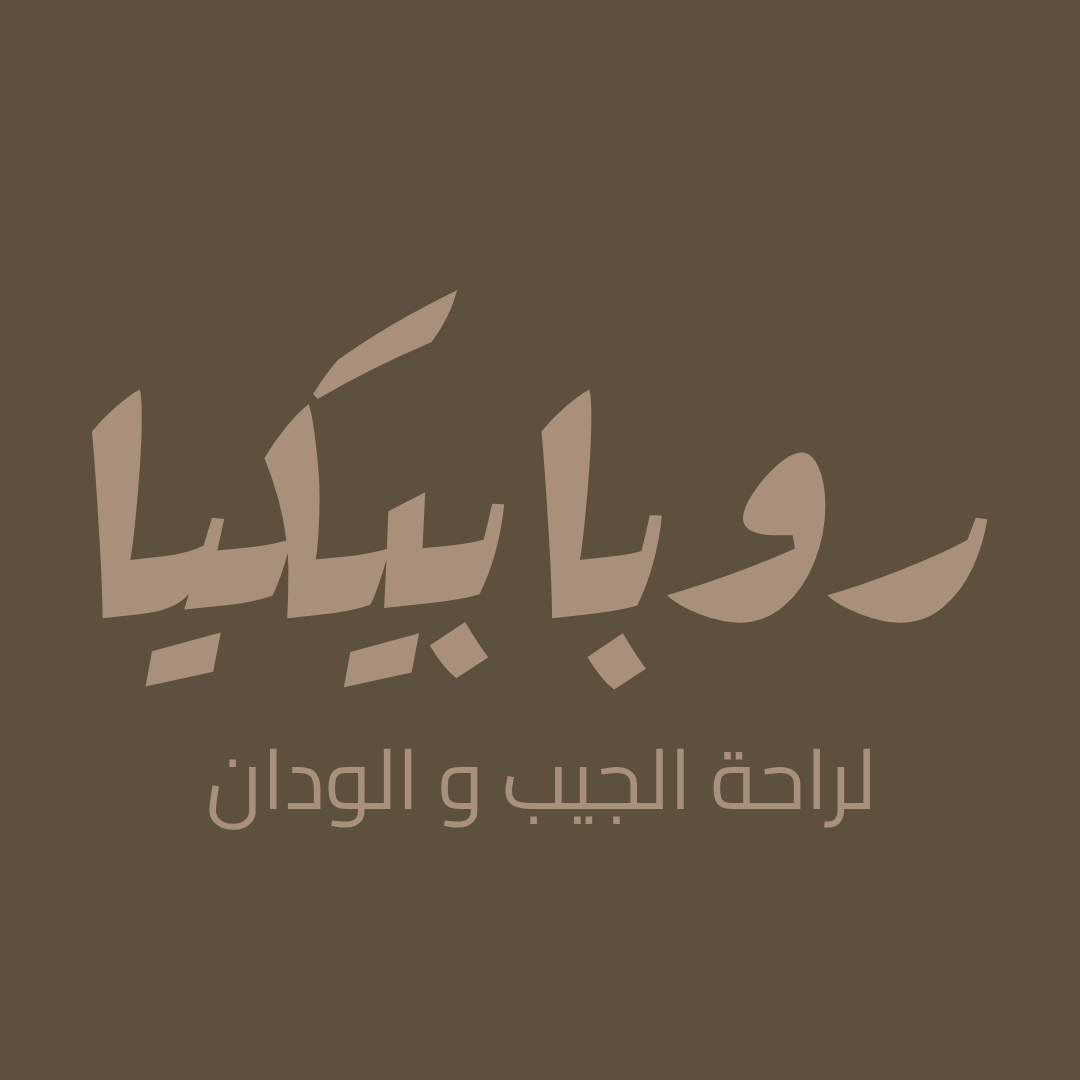
<style>
.page{position:relative;width:1080px;height:1080px;background:#5e503f}
.page>*{position:absolute;margin:0}
.t1{font:380px "Rakkas-Regular";color:#a9907d}
.t2{font:84px "Cairo-Regular";color:#a9907d}
</style>
<div class="page">
<p class="t1" style="left:91px;top:290px;width:897px;height:400px">روبابيكيا</p>
<p class="t2" style="left:209px;top:748px;width:661px;height:82px">لراحة الجيب و الودان</p>
</div>
